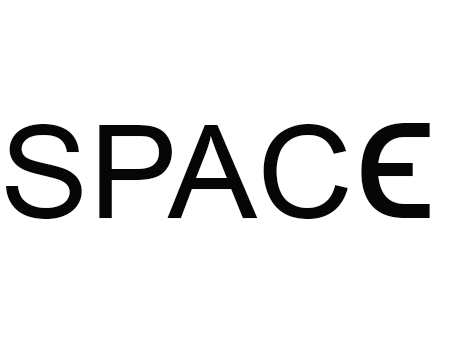
<style>
.page{position:relative;width:450px;height:350px;background:#ffffff}
.page>*{position:absolute;margin:0}
.t1{font:130.2px "ArialMT";color:#060606;text-transform:uppercase}
.t2{font:183.3px "ArialMT";color:#060606;text-transform:uppercase}
</style>
<div class="page">
<p class="t1" style="left:6px;top:123px;width:424px;height:96px">spac<span class="t2">ϵ</span></p>
</div>
